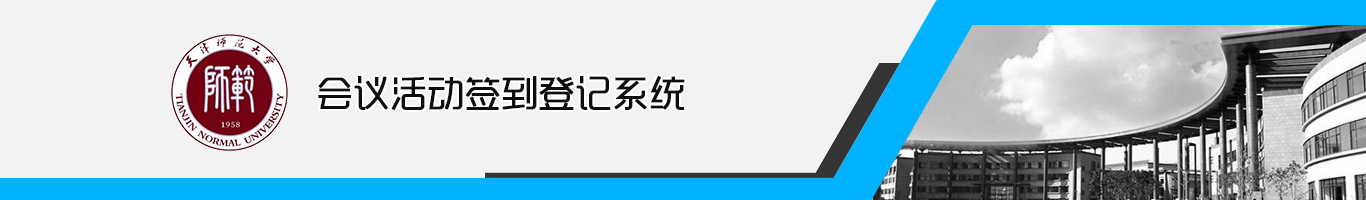
<style>
.page{position:relative;width:1366px;height:200px;background:#f2f2f2}
.page>*{position:absolute;margin:0}
.t1{font:36px "RTWSYueGoDemo-Regular";color:#0d0d0d;font-weight:bold}
</style>
<div class="page">
<p class="t1" style="left:318px;top:76px;width:367px;height:34px">会议活动签到登记系统</p>
</div>
